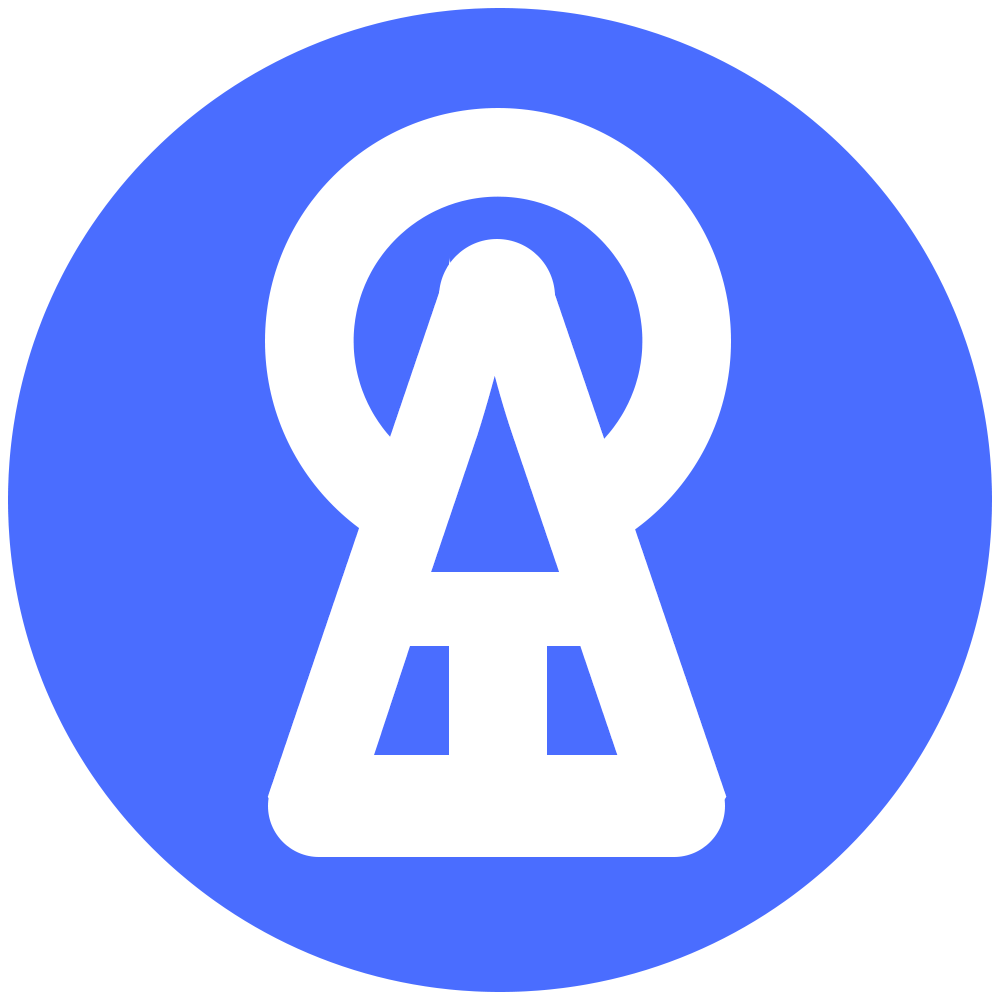
<style>
.page{position:relative;width:1000px;height:1000px;background:#4a6dff}
.page>*{position:absolute;margin:0}
.t1{font:777.1px "MyriadPro-Regular";letter-spacing:-0.01em;color:#ffffff;font-weight:bold}
</style>
<div class="page">
<p class="t1" style="left:267px;top:265px;width:460px;height:546px">A</p>
</div>
